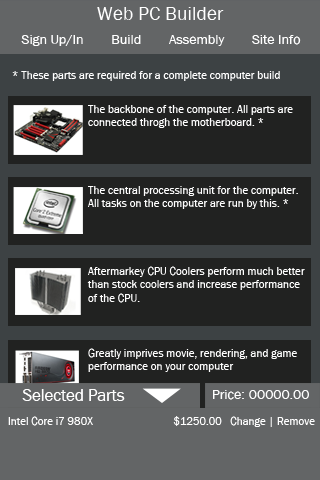
<style>
.page{position:relative;width:320px;height:480px;background:#212221}
.page>*{position:absolute;margin:0}
.t1{font:19.4px "FranklinGothic-Book";color:#ffffff}
.t2{font:13.9px "FranklinGothic-Book";color:#ffffff}
.t3{font:11.1px "FranklinGothic-Book";color:#ffffff}
.t4{font:16.7px "FranklinGothic-Book";color:#ffffff}
</style>
<div class="page">
<p class="t1" style="left:97px;top:7px;width:127px;height:13px">Web PC Builder</p>
<p class="t2" style="left:21px;top:35px;width:280px;height:11px">Sign Up/In        Build        Assembly        Site Info</p>
<p class="t3" style="left:12px;top:71px;width:268px;height:10px">* These parts are required for a complete computer build</p>
<p class="t3" style="left:88px;top:105px;width:205px;height:23px">The backbone of the computer. All parts are<br>connected throgh the motherboard. *</p>
<p class="t3" style="left:88px;top:186px;width:210px;height:23px">The central processing unit for the computer.<br>All tasks on the computer are run by this. *</p>
<p class="t3" style="left:87px;top:266px;width:218px;height:37px">Aftermarkey CPU Coolers perform much better<br>than stock coolers and increase performance<br>of the CPU.</p>
<p class="t3" style="left:88px;top:348px;width:209px;height:24px">Greatly imprives movie, rendering, and game<br>performance on your computer</p>
<p class="t4" style="left:22px;top:389px;width:103px;height:12px">Selected Parts</p>
<p class="t2" style="left:213px;top:390px;width:96px;height:10px">Price: 00000.00</p>
<p class="t3" style="left:8px;top:416px;width:307px;height:11px">Intel Core i7 980X                             $1250.00   Change | Remove</p>
</div>
